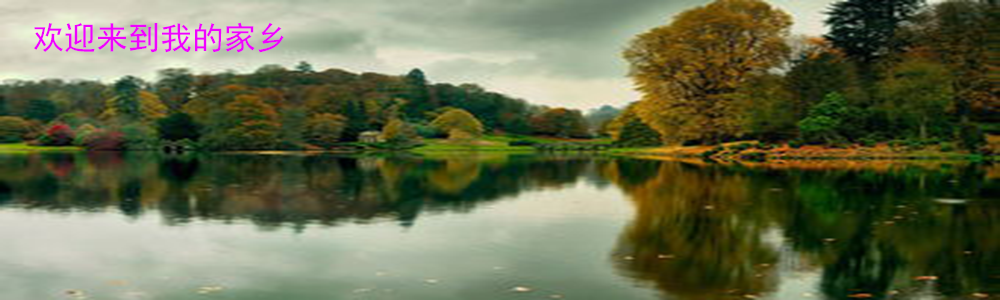
<style>
.page{position:relative;width:1000px;height:300px}
.page>*{position:absolute;margin:0}
.t1{font:32px "SimHei";color:#f002ff}
</style>
<div class="page">
<p class="t1" style="left:34px;top:22px;width:250px;height:31px">欢迎来到我的家乡</p>
</div>
